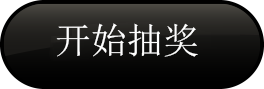
<style>
.page{position:relative;width:264px;height:89px}
.page>*{position:absolute;margin:0}
.t1{font:36px "SimSun";color:#ffffff}
</style>
<div class="page">
<p class="t1" style="left:56px;top:23px;width:142px;height:34px">开始抽奖</p>
</div>
